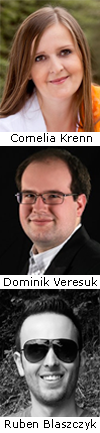
<style>
.page{position:relative;width:100px;height:433px}
.page>*{position:absolute;margin:0}
.t1{font:11.1px "Verdana";color:#000000}
</style>
<div class="page">
<p class="t1" style="left:11px;top:133px;width:81px;height:9px">Cornelia Krenn</p>
<p class="t1" style="left:4px;top:277px;width:93px;height:9px">Dominik Veresuk</p>
<p class="t1" style="left:5px;top:419px;width:91px;height:11px">Ruben Blaszczyk</p>
</div>
